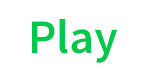
<style>
.page{position:relative;width:150px;height:80px;background:#ffffff}
.page>*{position:absolute;margin:0}
.t1{font:48px "SourceSansPro-Semibold";color:#00c84b}
</style>
<div class="page">
<p class="t1" style="left:32px;top:19px;width:86px;height:44px">Play</p>
</div>
